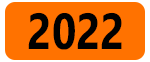
<style>
.page{position:relative;width:150px;height:62px;background:#ff7200}
.page>*{position:absolute;margin:0}
.t1{font:50.8px "Ebrima-Bold";color:#000000;text-transform:uppercase;scale:0.83 1}
</style>
<div class="page">
<p class="t1" style="left:28px;top:12px;width:94px;height:38px">2022</p>
</div>
